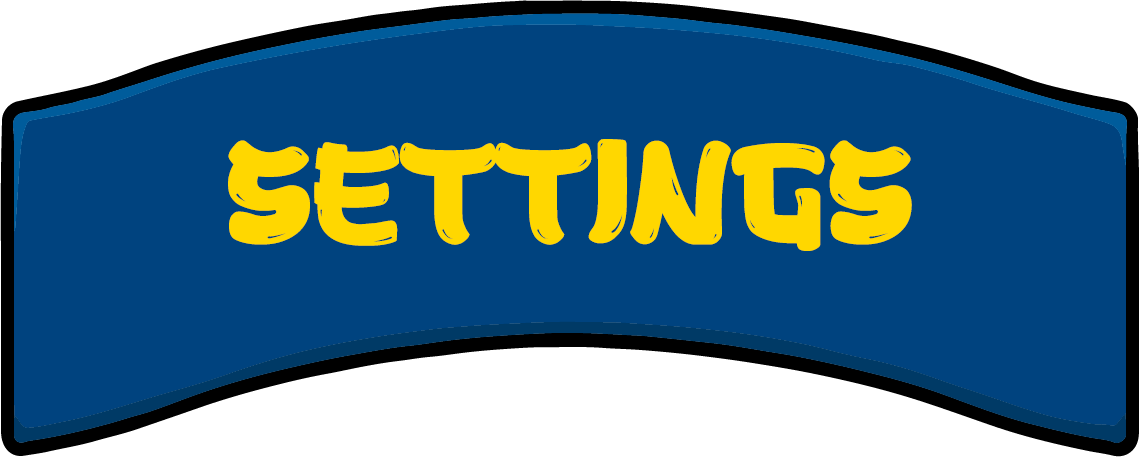
<style>
.page{position:relative;width:1139px;height:457px;background:#00437f}
.page>*{position:absolute;margin:0}
.t1{font:150px "SamuraiBlastRegular";color:#ffd700}
</style>
<div class="page">
<p class="t1" style="left:228px;top:139px;width:684px;height:112px">Settings</p>
</div>
